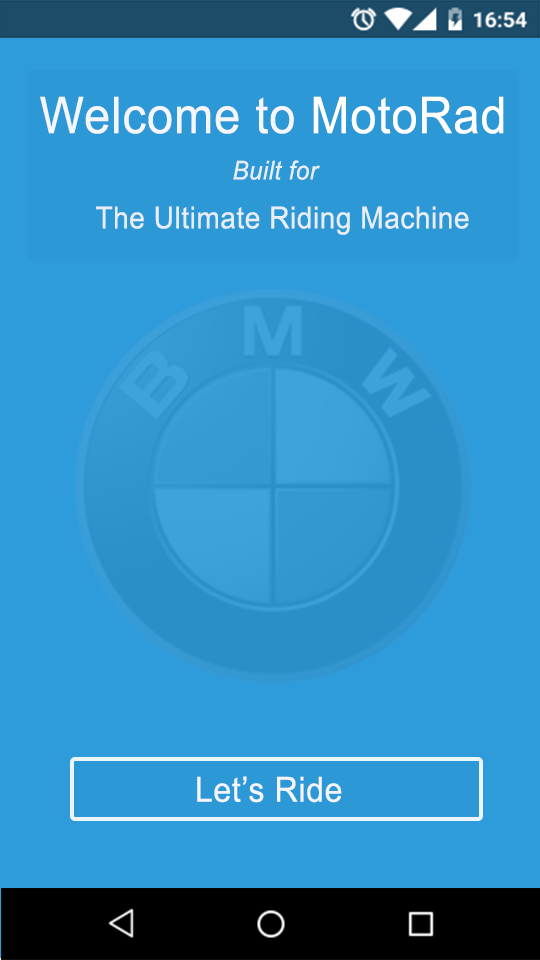
<style>
.page{position:relative;width:540px;height:960px;background:#2e9bda}
.page>*{position:absolute;margin:0}
.t1{font:50.8px "ArialMT";letter-spacing:0.02em;color:#f5f6fc;scale:0.93 1}
.t2{font:50.8px "ArialMT";letter-spacing:0.02em;color:#ffffff;scale:0.93 1}
.t3{font:25.9px "Arial-ItalicMT";letter-spacing:0.02em;color:#f5f6fc;scale:0.93 1}
.t4{font:30.2px "ArialMT";letter-spacing:0.02em;color:#f5f6fc;scale:0.93 1}
.t5{font:34.6px "ArialMT";letter-spacing:0.02em;color:#f5f6fc;scale:0.93 1}
</style>
<div class="page">
<p class="t1" style="left:40px;top:96px;width:464px;height:38px">Welcome to <span class="t2">MotoRad</span></p>
<p class="t3" style="left:233px;top:160px;width:87px;height:20px;opacity:0.9">Built for</p>
<p class="t4" style="left:96px;top:206px;width:373px;height:29px;opacity:0.9">The Ultimate Riding Machine</p>
<p class="t5" style="left:197px;top:776px;width:145px;height:27px">Let’s Ride</p>
</div>
